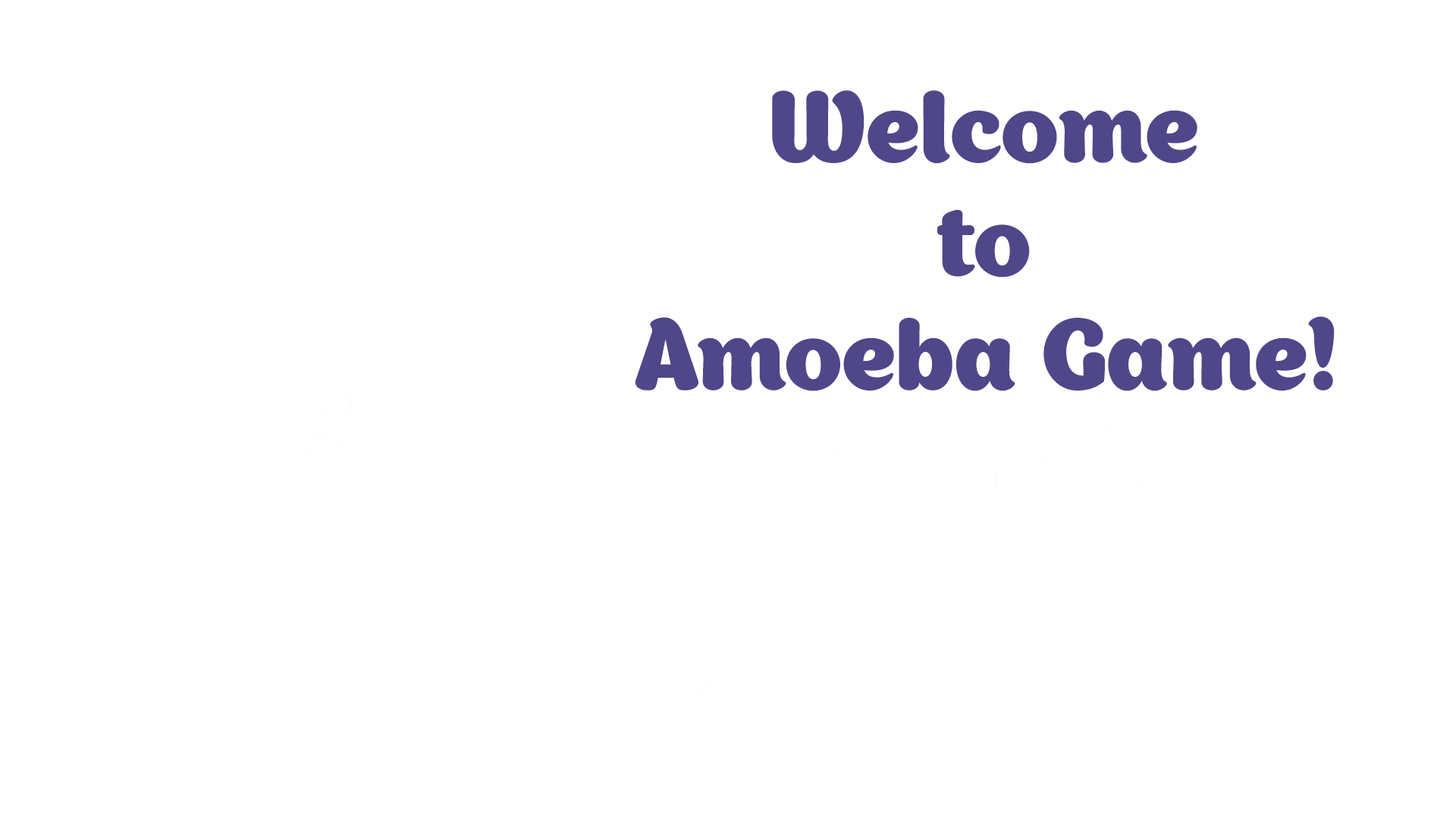
<style>
.page{position:relative;width:1456px;height:819px;background:#ffffff}
.page>*{position:absolute;margin:0}
.t1{font:94.8px "Appetite-Rounded";color:#4f4789;font-weight:bold}
</style>
<div class="page">
<p class="t1" style="left:635px;top:90px;width:700px;height:301px;text-align:center">Welcome<br>to<br>Amoeba Game!</p>
</div>
